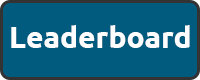
<style>
.page{position:relative;width:200px;height:80px;background:#005b7f}
.page>*{position:absolute;margin:0}
.t1{font:30px "Ubuntu-Bold";color:#ffffff}
</style>
<div class="page">
<p class="t1" style="left:11px;top:25px;width:179px;height:23px">Leaderboard</p>
</div>
